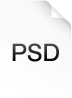
<style>
.page{position:relative;width:72px;height:98px;background:#f9f9f9}
.page>*{position:absolute;margin:0}
.t1{font:24px "HelveticaNeueLTCom-Md"}
</style>
<div class="page">
<p class="t1" style="left:12px;top:43px;width:47px;height:19px">PSD</p>
</div>
